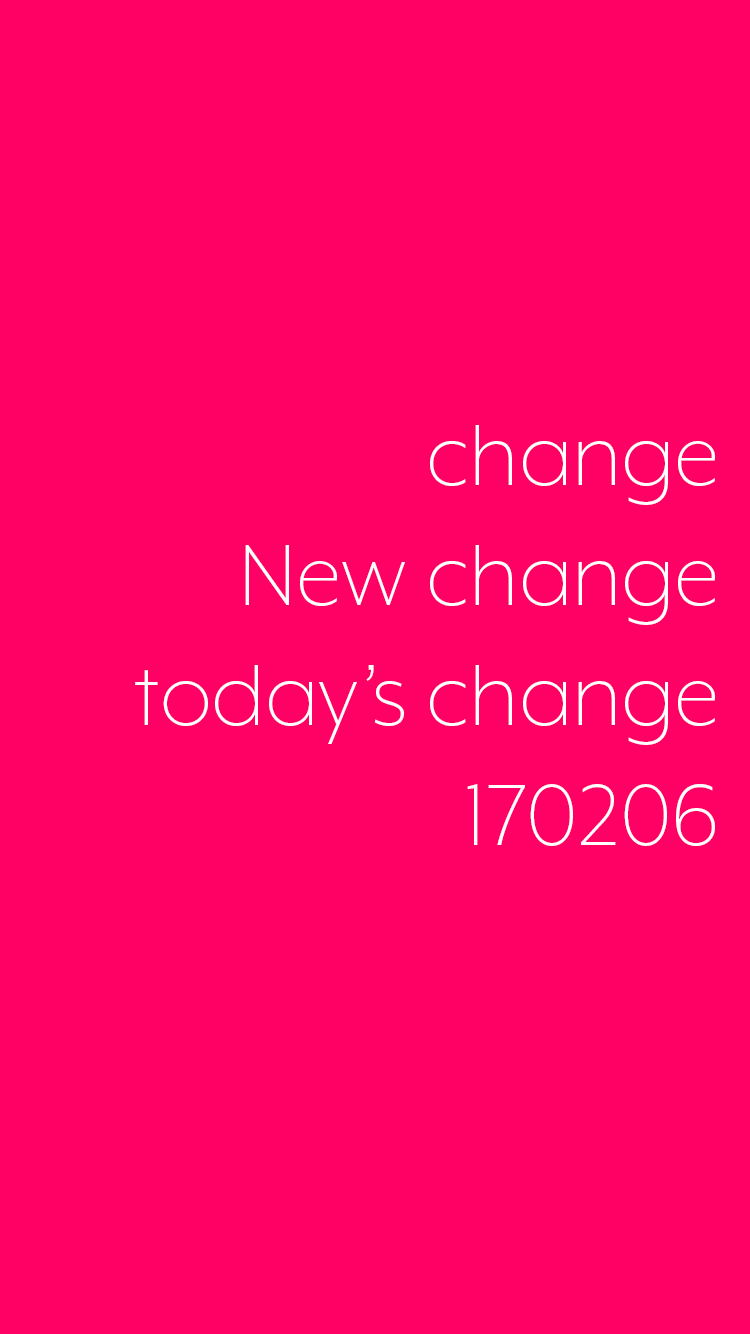
<style>
.page{position:relative;width:750px;height:1334px;background:#ff0065}
.page>*{position:absolute;margin:0}
.t1{font:100px "MrEavesXLModOT-Light";color:#ffffff}
</style>
<div class="page">
<p class="t1" style="left:135px;top:425px;width:580px;height:421px;text-align:right">change<br>New change<br>today’s change<br>170206</p>
</div>
